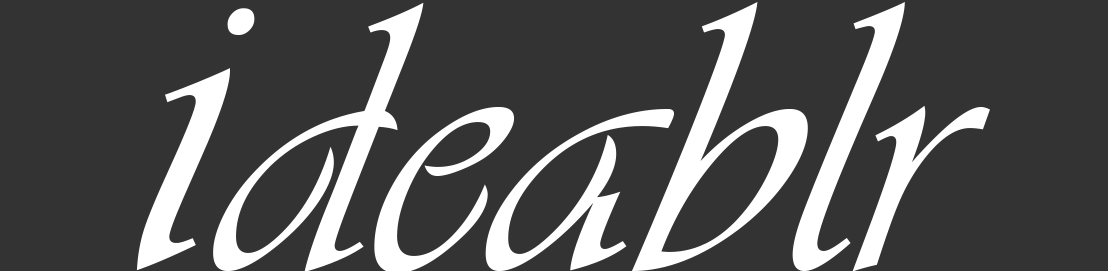
<style>
.page{position:relative;width:1108px;height:271px;background:#333333}
.page>*{position:absolute;margin:0}
.t1{font:400.1px "Vivaldii";color:#ffffff}
.t2{font:480.1px "Vivaldii";color:#ffffff}
</style>
<div class="page">
<p class="t1" style="left:213px;top:2px;width:777px;height:271px">deablr</p>
<p class="t2" style="left:136px;top:8px;width:119px;height:263px">i</p>
</div>
